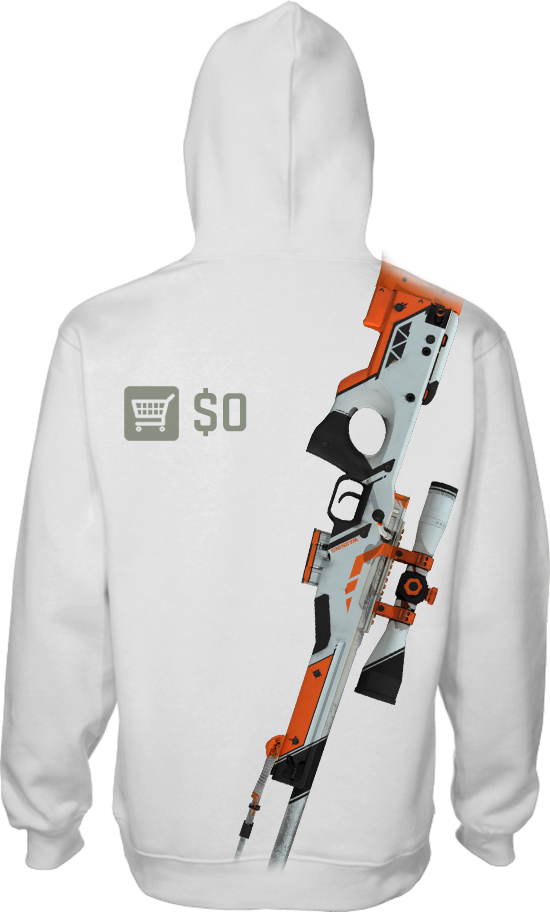
<style>
.page{position:relative;width:550px;height:912px;background:#ffffff}
.page>*{position:absolute;margin:0}
.t1{font:56px "Stratum2-Medium";letter-spacing:-0.05em;color:#899082;font-weight:bold}
</style>
<div class="page">
<p class="t1" style="left:194px;top:388px;width:53px;height:49px">$0</p>
</div>
